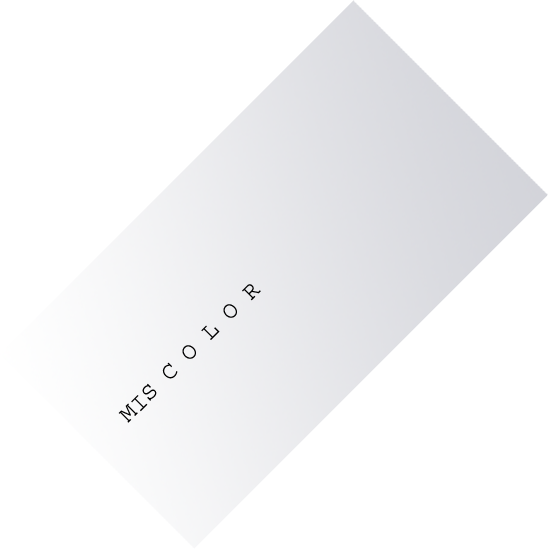
<style>
.page{position:relative;width:549px;height:549px;background:#ffffff}
.page>*{position:absolute;margin:0}
.t1{font:24px "Courier";color:#000000}
</style>
<div class="page">
<p class="t1" style="left:116px;top:268px;width:160px;height:160px;rotate:-45deg">MIS C O L O R</p>
</div>
